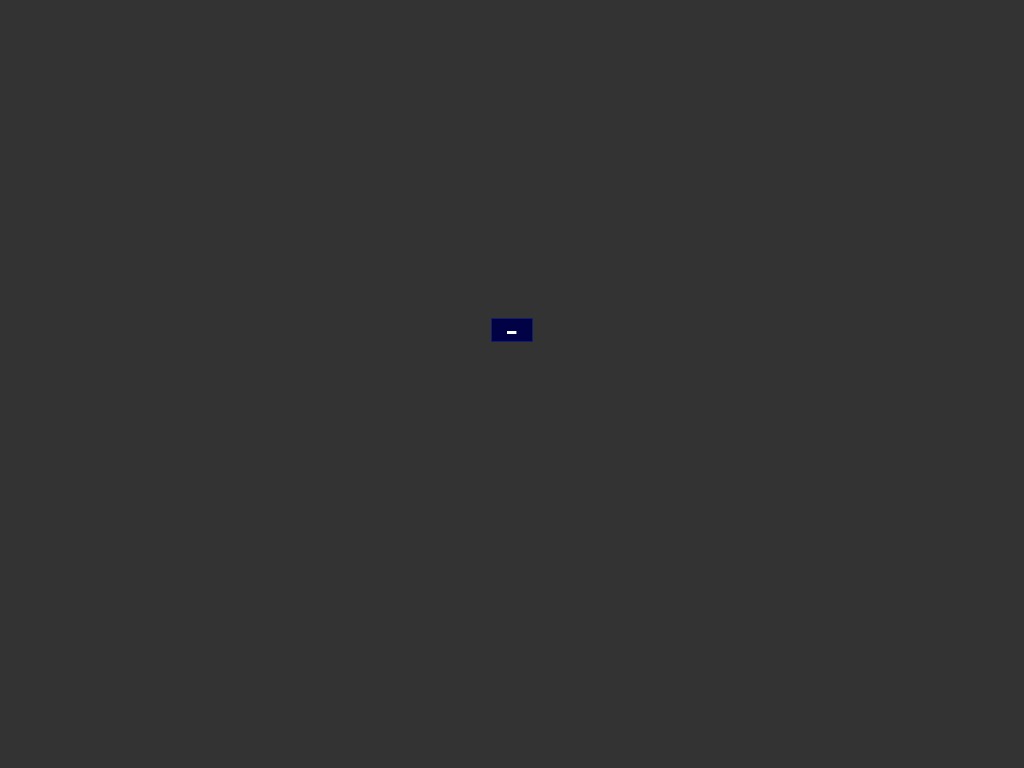
<style>
.page{position:relative;width:1024px;height:768px;background:#333333}
.page>*{position:absolute;margin:0}
.t1{font:32px "Rockwell";color:#ffffff}
</style>
<div class="page">
<p class="t1" style="left:507px;top:331px;width:10px;height:3px">-</p>
</div>
